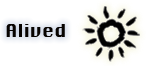
<style>
.page{position:relative;width:146px;height:66px;background:#ffffff}
.page>*{position:absolute;margin:0}
.t1{font:17.4px "Krungthep";letter-spacing:0.01em;color:#080401;scale:1.03 1}
</style>
<div class="page">
<p class="t1" style="left:6px;top:24px;width:59px;height:13px">Alived</p>
<p class="t1" style="left:6px;top:24px;width:59px;height:13px;opacity:0.35">Alived</p>
</div>
